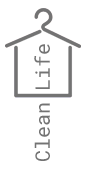
<style>
.page{position:relative;width:90px;height:170px;background:#ffffff}
.page>*{position:absolute;margin:0}
.t1{font:20px "RobotoMono-Regular";letter-spacing:-0.01em;color:#737373}
</style>
<div class="page">
<p class="t1" style="left:34px;top:44px;width:16px;height:117px;rotate:-90deg">Clean Life</p>
</div>
